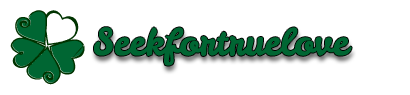
<style>
.page{position:relative;width:410px;height:95px;background:#ffffff}
.page>*{position:absolute;margin:0}
.t1{font:37px "LeckerliOne-Regular";color:#006633}
</style>
<div class="page">
<p class="t1" style="left:94px;top:27px;width:258px;height:39px">Seekfortruelove</p>
</div>
